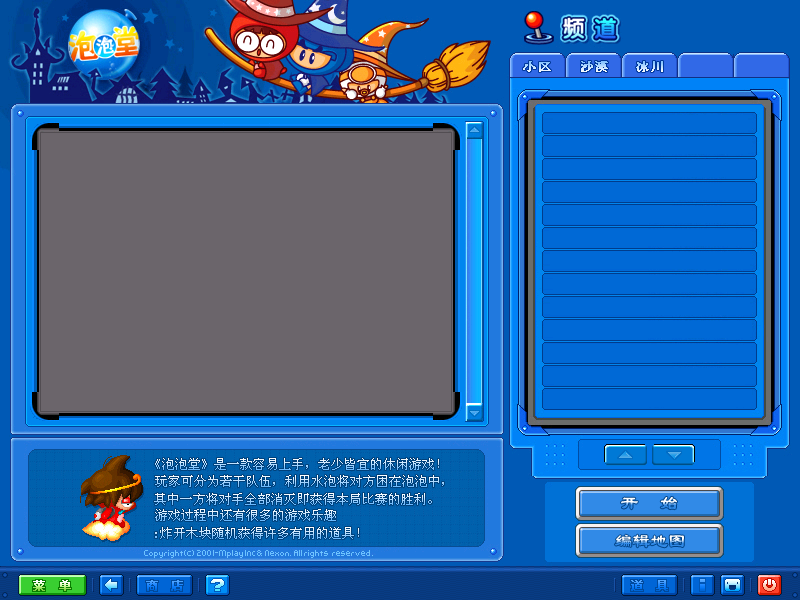
<style>
.page{position:relative;width:800px;height:600px;background:#6b656b}
.page>*{position:absolute;margin:0}
.t1{font:12px "STZhongsong";font-weight:bold;scale:1.15 1}
.t2{font:12px "SimSun"}
</style>
<div class="page">
<p class="t1" style="left:523px;top:61px;width:28px;height:11px">小区</p>
<p class="t1" style="left:581px;top:61px;width:27px;height:11px">沙漠</p>
<p class="t1" style="left:636px;top:61px;width:27px;height:11px">冰川</p>
<p class="t2" style="left:155px;top:458px;width:284px;height:12px">《泡泡堂》是一款容易上手，老少皆宜的休闲游戏！</p>
<p class="t2" style="left:155px;top:475px;width:289px;height:12px">玩家可分为若干队伍，利用水泡将对方困在泡泡中，</p>
<p class="t2" style="left:154px;top:493px;width:278px;height:12px">其中一方将对手全部消灭即获得本局比赛的胜利。</p>
<p class="t2" style="left:155px;top:509px;width:181px;height:12px">游戏过程中还有很多的游戏乐趣</p>
<p class="t2" style="left:155px;top:527px;width:204px;height:12px">:炸开木块随机获得许多有用的道具！</p>
</div>
